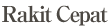
<style>
.page{position:relative;width:108px;height:27px;background:#ffffff}
.page>*{position:absolute;margin:0}
.t1{font:22px "RyuminPro-ExBold";letter-spacing:-0.08em;color:#4c4843}
</style>
<div class="page">
<p class="t1" style="left:2px;top:5px;width:106px;height:21px">Rakit Cepat</p>
</div>
